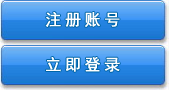
<style>
.page{position:relative;width:169px;height:90px}
.page>*{position:absolute;margin:0}
.t1{font:16px "SimHei";letter-spacing:0.2em;color:#ffffff;font-weight:bold}
</style>
<div class="page">
<p class="t1" style="left:45px;top:12px;width:75px;height:15px">注册账号</p>
<p class="t1" style="left:46px;top:57px;width:74px;height:15px">立即登录</p>
</div>
